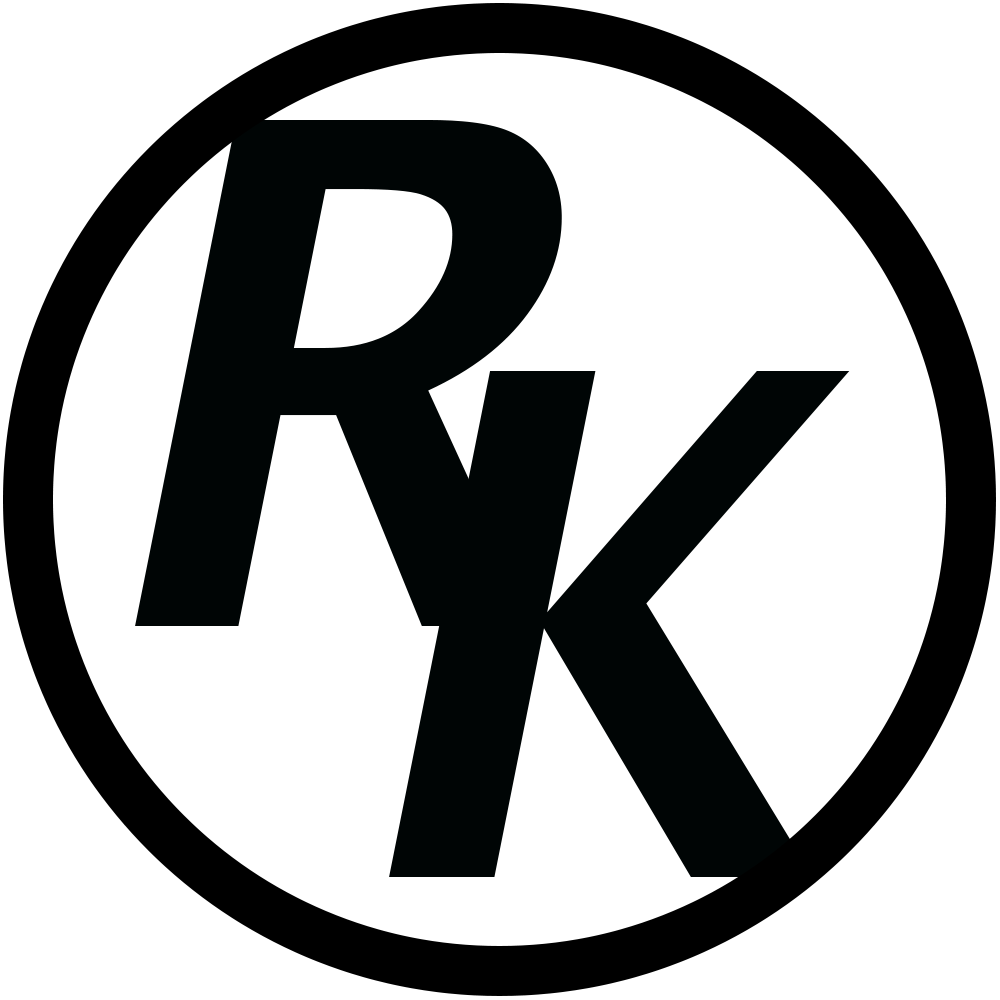
<style>
.page{position:relative;width:1000px;height:1000px;background:#ffffff}
.page>*{position:absolute;margin:0}
.t1{font:700px "LucidaSans-DemiItalic";color:#000505}
</style>
<div class="page">
<p class="t1" style="left:135px;top:120px;width:427px;height:506px">R</p>
<p class="t1" style="left:389px;top:371px;width:461px;height:506px">K</p>
</div>
